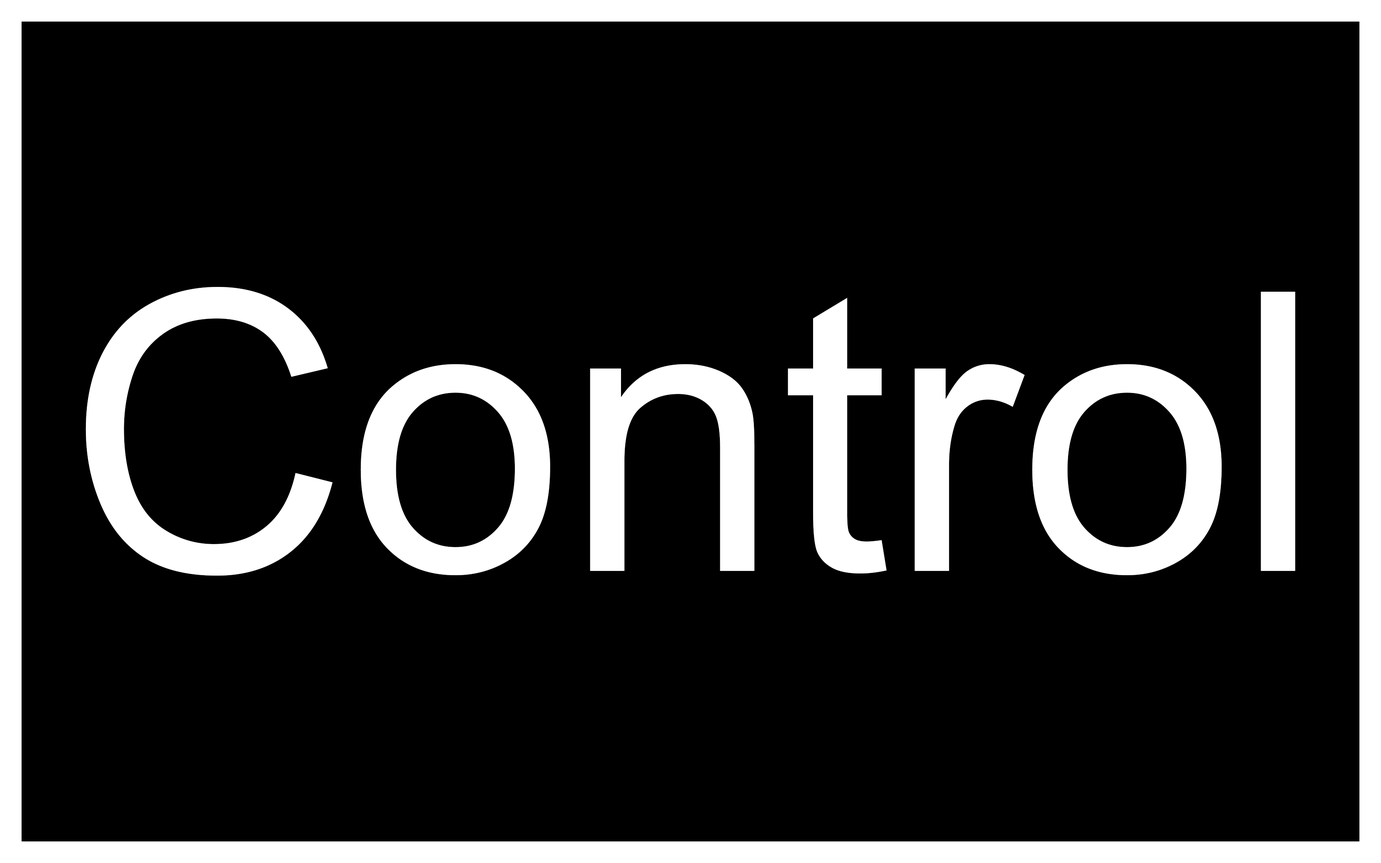
<style>
.page{position:relative;width:1381px;height:863px;background:#000000}
.page>*{position:absolute;margin:0}
.t1{font:389.7px "ArialMT";color:#ffffff}
</style>
<div class="page">
<p class="t1" style="left:85px;top:287px;width:1211px;height:289px">Control</p>
</div>
